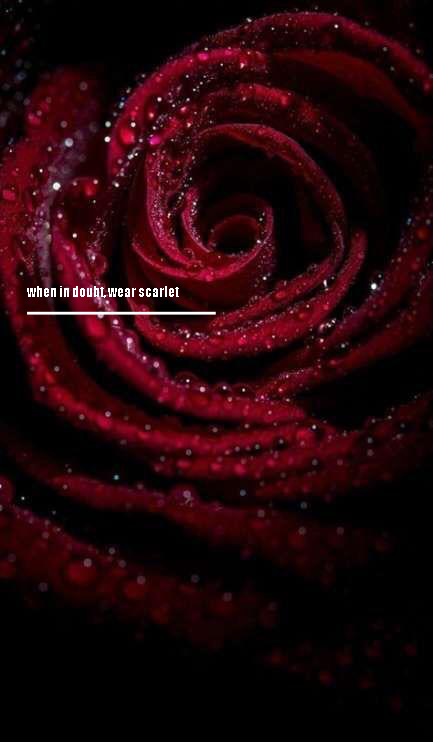
<style>
.page{position:relative;width:433px;height:742px;background:#000000}
.page>*{position:absolute;margin:0}
.t1{font:14px "Impact";color:#ffffff}
</style>
<div class="page">
<p class="t1" style="left:27px;top:286px;width:152px;height:12px">when in doubt, wear scarlet</p>
</div>
